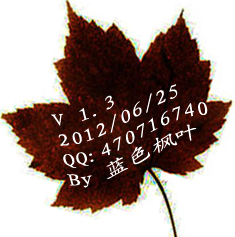
<style>
.page{position:relative;width:235px;height:237px;background:#ffffff}
.page>*{position:absolute;margin:0}
.t1{font:18px "KaiTi_GB2312";color:#ffffff;scale:1.45 1}
</style>
<div class="page">
<p class="t1" style="left:51px;top:84px;width:157px;height:104px;rotate:-20deg">V 1.3<br>2012/06/25<br>QQ:470716740<br>By 蓝色枫叶</p>
</div>
